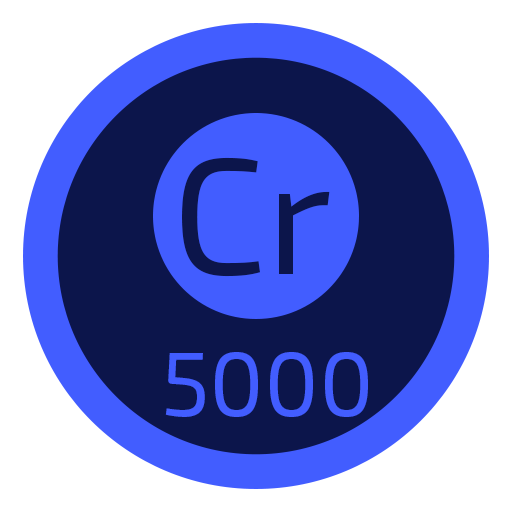
<style>
.page{position:relative;width:512px;height:512px;background:#ffffff}
.page>*{position:absolute;margin:0}
.t1{font:165.1px "Exo2-Regular";color:#0c154b}
.t2{font:90.9px "Exo2-Regular";color:#425dff}
</style>
<div class="page">
<p class="t1" style="left:182px;top:157px;width:148px;height:120px">Cr</p>
<p class="t2" style="left:165px;top:352px;width:203px;height:65px">5000</p>
</div>
